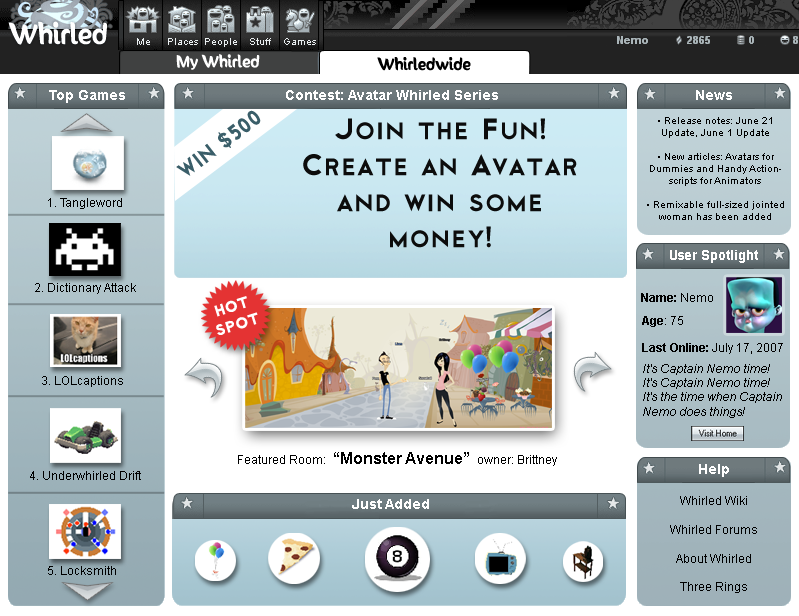
<style>
.page{position:relative;width:799px;height:616px;background:#ffffff}
.page>*{position:absolute;margin:0}
.t1{font:14px "SunnySide";color:#ffffff}
.t2{font:14px "SunnySide";color:#000000}
.t3{font:14px "Arial-BoldMT";color:#ffffff}
.t4{font:21.9px "Cityof";color:#3a5e69;scale:0.91 1}
.t5{font:30px "Cityof";color:#0c0c0c}
.t6{font:30px "Cityof";color:#3a5e69}
.t7{font:10px "ArialMT";color:#000000}
.t8{font:12px "ArialMT";color:#000000}
.t9{font:14px "Arial-BoldMT";color:#ffffff;scale:0.95 1}
.t10{font:12px "Arial-BoldMT";color:#000000}
.t11{font:15.6px "Cityof";color:#ffffff}
.t12{font:12px "Arial-ItalicMT";color:#000000}
.t13{font:16px "Arial-BoldMT";color:#000000}
</style>
<div class="page">
<p class="t1" style="left:176px;top:54px;width:84px;height:16px">My Whirled</p>
<p class="t2" style="left:377px;top:57px;width:94px;height:14px">Whirledwide</p>
<p class="t3" style="left:49px;top:90px;width:76px;height:13px">Top Games</p>
<p class="t3" style="left:286px;top:90px;width:212px;height:10px">Contest: Avatar Whirled Series</p>
<p class="t3" style="left:696px;top:90px;width:36px;height:10px">News</p>
<p class="t4" style="left:176px;top:110px;width:85px;height:66px;rotate:-37deg">WIN $500</p>
<p class="t5" style="left:303px;top:118px;width:274px;height:130px;text-align:center">Join the Fun! Create an Avatar and win some money!<br><span class="t6">!</span></p>
<p class="t7" style="left:647px;top:117px;width:137px;height:103px;text-align:center">• Release notes: June 21 Update, June 1 Update<br><br>• New articles: Avatars for Dummies and Handy Actionscripts for Animators <br><br>• Remixable full-sized jointed woman has been added</p>
<p class="t8" style="left:48px;top:198px;width:74px;height:11px">1. Tangleword</p>
<p class="t9" style="left:670px;top:250px;width:88px;height:13px">User Spotlight</p>
<p class="t8" style="left:35px;top:283px;width:101px;height:11px">2. Dictionary Attack</p>
<p class="t10" style="left:641px;top:293px;width:72px;height:9px">Name: <span class="t8">Nemo</span></p>
<p class="t11" style="left:214px;top:296px;width:44px;height:39px;text-align:center;rotate:-17deg">HOT<br>SPOT</p>
<p class="t8" style="left:642px;top:316px;width:41px;height:11px"><span class="t10">Age</span>: 75</p>
<p class="t8" style="left:642px;top:343px;width:141px;height:11px"><span class="t10">Last Online: </span>July 17, 2007</p>
<p class="t12" style="left:643px;top:364px;width:139px;height:54px">It's Captain Nemo time! It's Captain Nemo time! It's the time when Captain Nemo does things!</p>
<p class="t8" style="left:42px;top:376px;width:81px;height:11px">3. LOLcaptions</p>
<p class="t13" style="left:238px;top:452px;width:319px;height:14px"><span class="t8">Featured Room:  </span>“Monster Avenue”  <span class="t8">owner: Brittney</span></p>
<p class="t8" style="left:30px;top:471px;width:111px;height:9px">4. Underwhirled Drift</p>
<p class="t3" style="left:699px;top:464px;width:30px;height:13px">Help</p>
<p class="t8" style="left:670px;top:496px;width:87px;height:97px;text-align:center">Whirled Wiki<br><br>Whirled Forums<br><br>About Whirled<br><br>Three Rings</p>
<p class="t3" style="left:352px;top:499px;width:77px;height:10px">Just Added</p>
<p class="t8" style="left:48px;top:566px;width:68px;height:9px">5. Locksmith</p>
</div>
